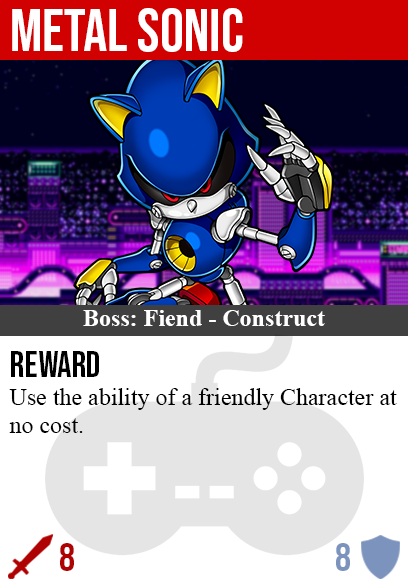
<style>
.page{position:relative;width:408px;height:585px;background:#ffffff}
.page>*{position:absolute;margin:0}
.t1{font:60px "BebasNeue-Regular";color:#ffffff}
.t2{font:24px "TimesNewRomanPS-BoldMT";color:#ffffff}
.t3{font:36px "BebasNeue-Regular";color:#000000}
.t4{font:24px "TimesNewRomanPSMT";color:#000000}
.t5{font:40px "BebasNeue-Regular";color:#af0202}
.t6{font:40px "BebasNeue-Regular";color:#7c94bd}
</style>
<div class="page">
<p class="t1" style="left:12px;top:8px;width:231px;height:44px">metal sonic</p>
<p class="t2" style="left:83px;top:310px;width:242px;height:16px">Boss: Fiend - Construct</p>
<p class="t3" style="left:11px;top:351px;width:88px;height:26px">reward</p>
<p class="t4" style="left:9px;top:388px;width:388px;height:45px">Use the ability of a friendly Character at<br>no cost.</p>
<p class="t5" style="left:60px;top:543px;width:14px;height:28px">8</p>
<p class="t6" style="left:336px;top:543px;width:14px;height:28px">8</p>
</div>
